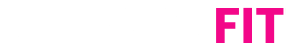
<style>
.page{position:relative;width:286px;height:50px;background:#ffffff}
.page>*{position:absolute;margin:0}
.t1{font:50px "Poppins-Bold";color:#f30789}
</style>
<div class="page">
<p class="t1" style="left:216px;top:7px;width:68px;height:36px">FIT</p>
</div>
